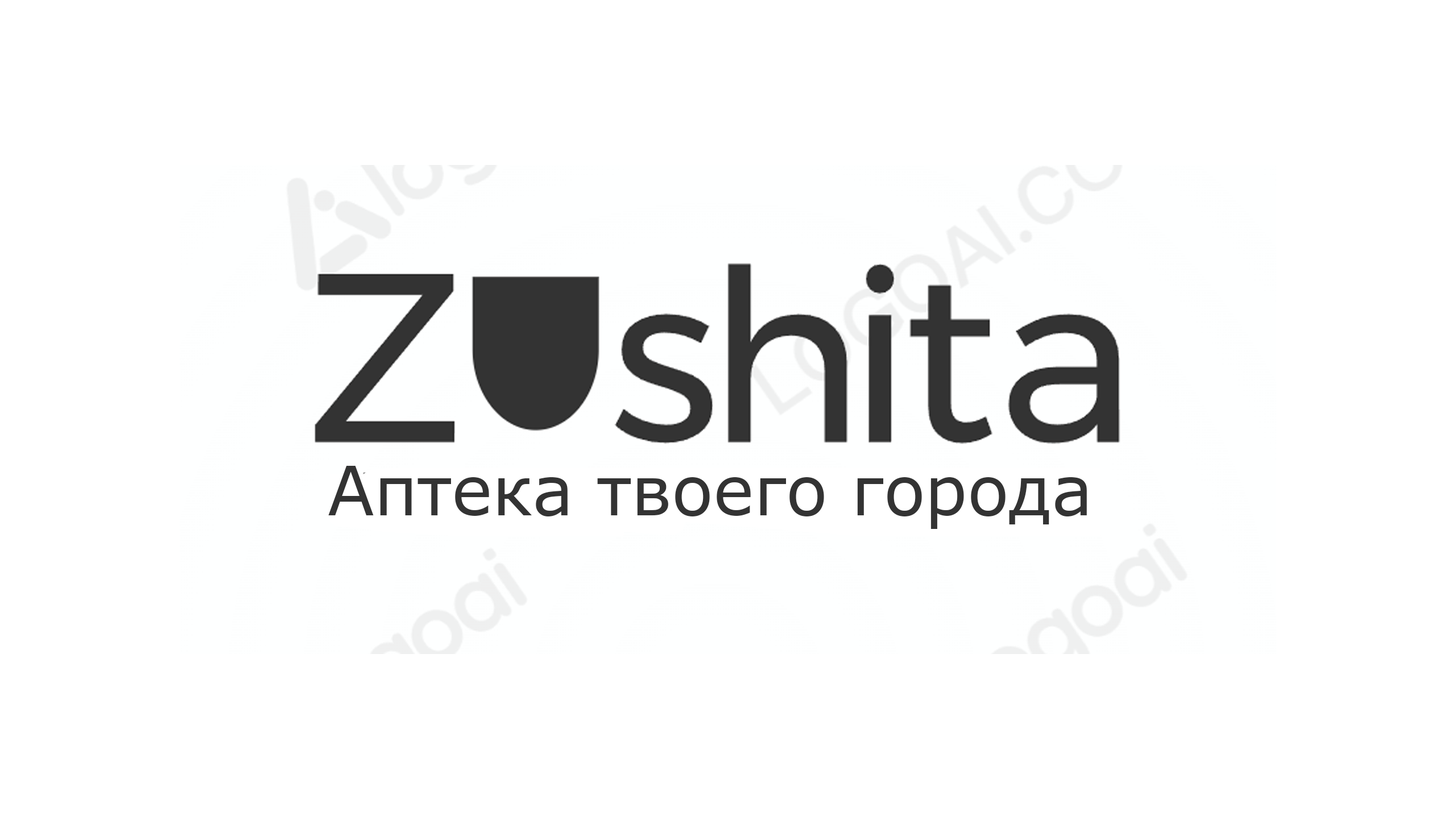
<style>
.page{position:relative;width:1456px;height:819px;background:#ffffff}
.page>*{position:absolute;margin:0}
.t1{font:68.2px "MSReferenceSansSerif";color:#333333}
</style>
<div class="page">
<p class="t1" style="left:328px;top:466px;width:759px;height:63px">Аптека твоего города</p>
</div>
